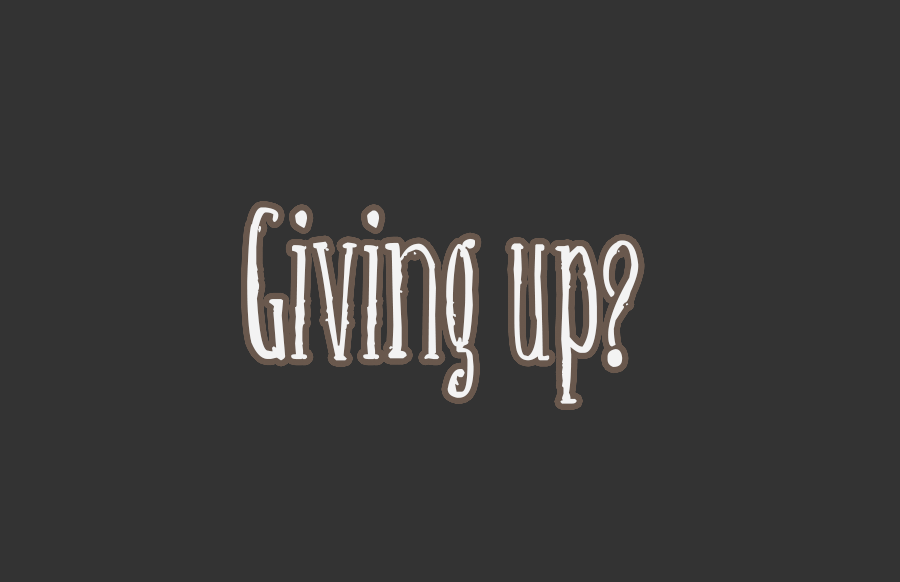
<style>
.page{position:relative;width:900px;height:582px;background:#333333}
.page>*{position:absolute;margin:0}
.t1{font:166.7px "Belisaplumillamanual";color:#f3f3f3}
</style>
<div class="page">
<p class="t1" style="left:247px;top:207px;width:392px;height:197px">Giving up?</p>
</div>
